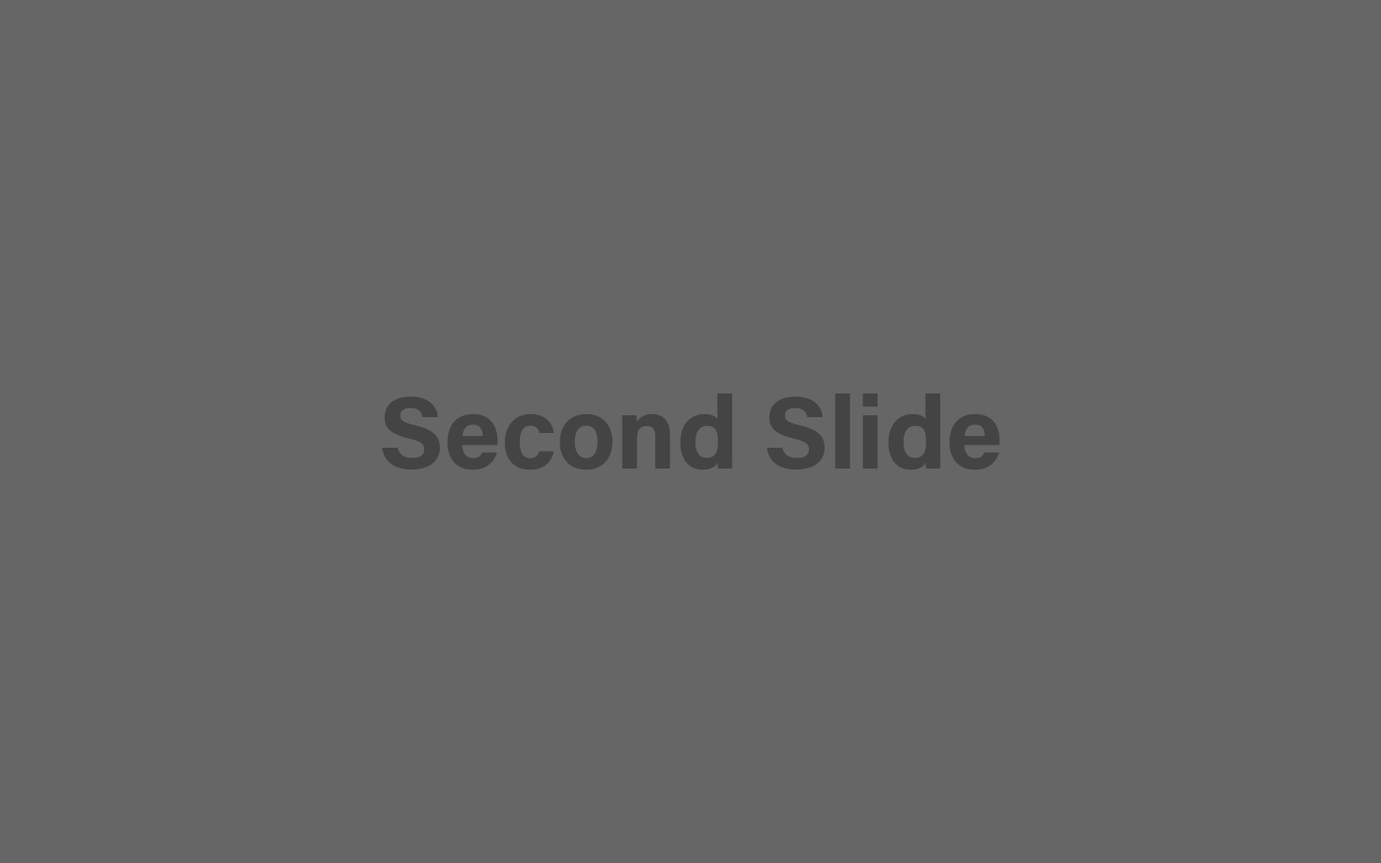
<style>
.page{position:relative;width:1381px;height:863px;background:#666666}
.page>*{position:absolute;margin:0}
.t1{font:102.8px "AcuminConcept-Bold";color:#444444}
</style>
<div class="page">
<p class="t1" style="left:382px;top:393px;width:618px;height:78px">Second Slide</p>
</div>
